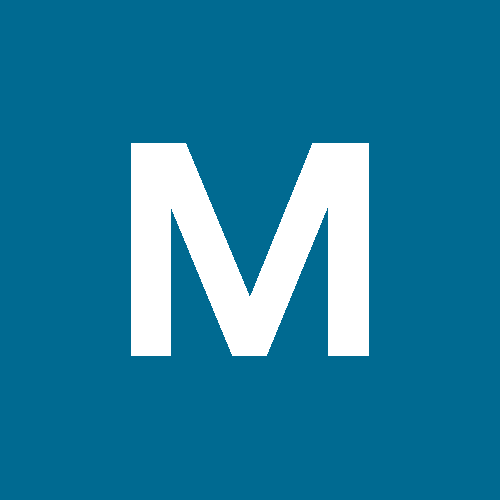
<style>
.page{position:relative;width:500px;height:500px;background:#006a91}
.page>*{position:absolute;margin:0}
.t1{font:300px "CircularStd-Bold";color:#ffffff}
</style>
<div class="page">
<p class="t1" style="left:131px;top:143px;width:238px;height:213px">M</p>
</div>
